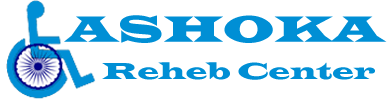
<style>
.page{position:relative;width:391px;height:100px;background:#ffffff}
.page>*{position:absolute;margin:0}
.t1{font:38px "LatinWide";color:#008fd5}
.t2{font:24px "LatinWide";color:#008fd5}
</style>
<div class="page">
<p class="t1" style="left:64px;top:15px;width:323px;height:28px">ASHOKA</p>
<p class="t2" style="left:102px;top:62px;width:273px;height:18px">Reheb Center</p>
</div>
